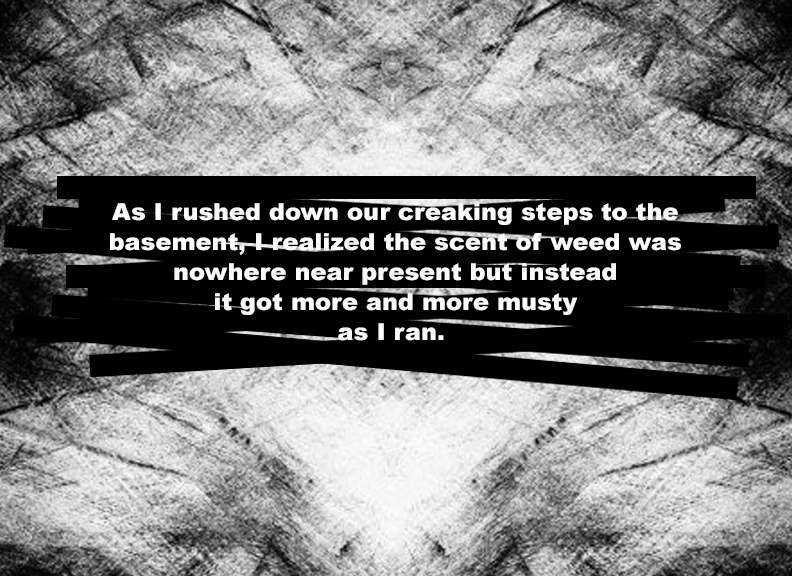
<style>
.page{position:relative;width:792px;height:576px;background:#000000}
.page>*{position:absolute;margin:0}
.t1{font:23.5px/30px "Arial-Black";color:#fbfdfc}
</style>
<div class="page">
<p class="t1" style="left:110px;top:203px;width:571px;height:138px;text-align:center">As I rushed down our creaking steps to the<br>basement, I realized the scent of weed was<br>nowhere near present but instead<br>it got more and more musty<br>as I ran.</p>
</div>
